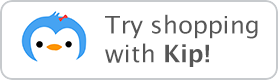
<style>
.page{position:relative;width:278px;height:80px;background:#ffffff}
.page>*{position:absolute;margin:0}
.t1{font:24.3px/28.8px "LucidaGrande";color:#565656}
.t2{font:24.3px/28.8px "LucidaGrande-Bold";color:#565656}
</style>
<div class="page">
<p class="t1" style="left:105px;top:14px;width:153px;height:53px">Try shopping <br>with <span class="t2">Kip!</span></p>
</div>
